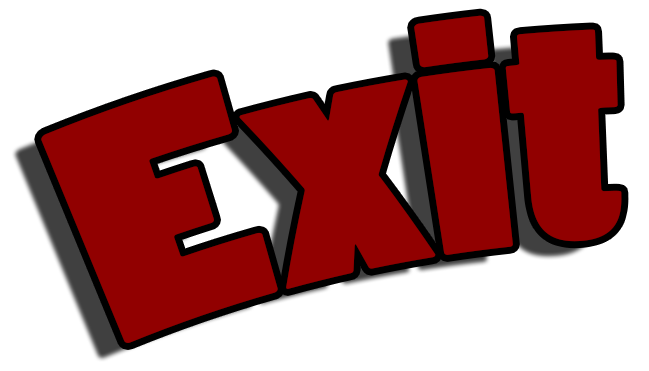
<style>
.page{position:relative;width:649px;height:371px;background:#ffffff}
.page>*{position:absolute;margin:0}
.t1{font:300px "PoplarStd";color:#910000}
</style>
<div class="page">
<p class="t1" style="left:41px;top:15px;width:581px;height:328px;rotate:-12deg">Exit</p>
</div>
